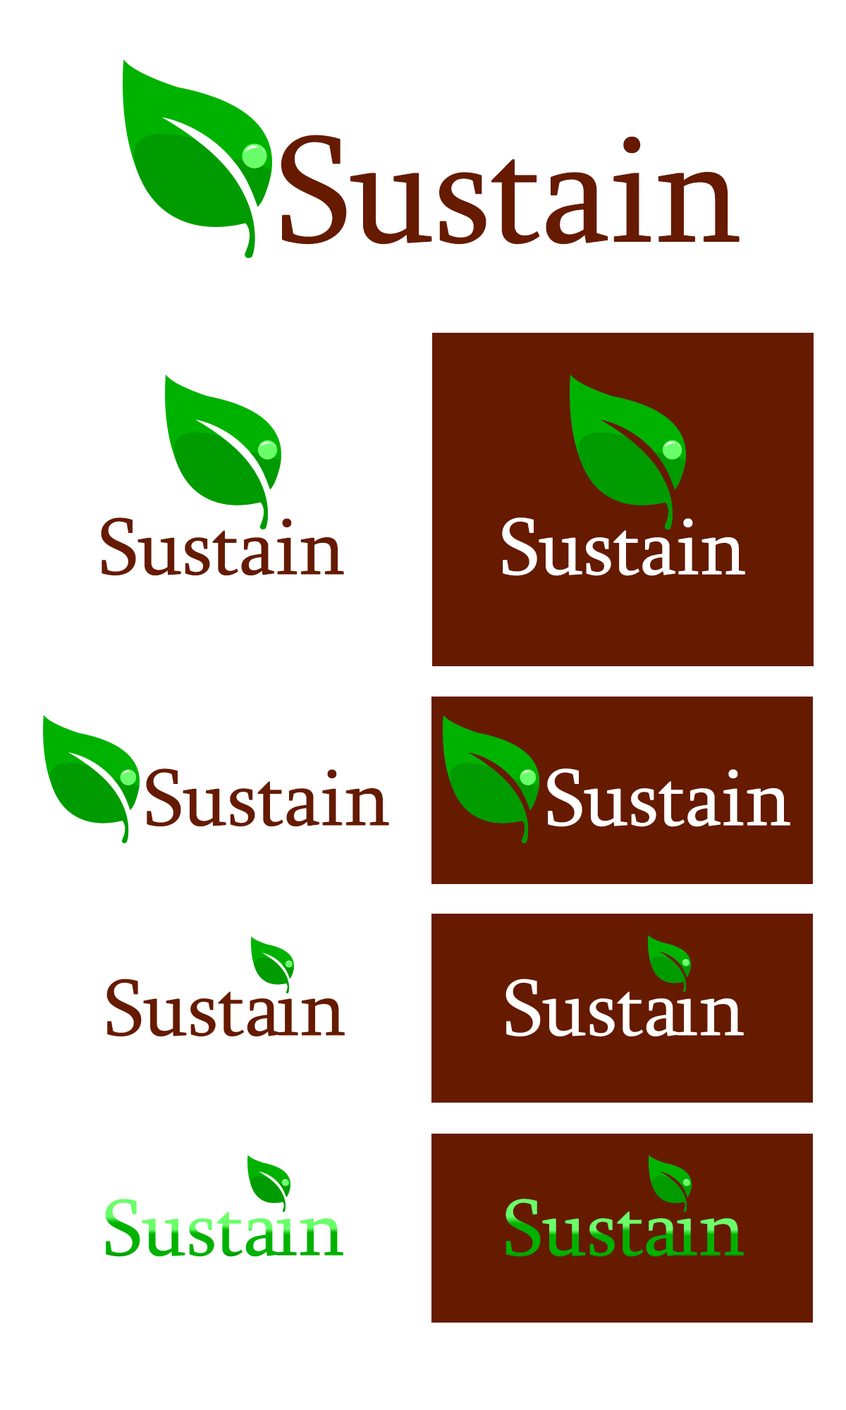
<style>
.page{position:relative;width:846px;height:1410px;background:#ffffff}
.page>*{position:absolute;margin:0}
.t1{font:155.1px "Sylfaen";color:#661a00}
.t2{font:82px "Sylfaen";color:#661a00}
.t3{font:82px "Sylfaen";color:#ffffff}
</style>
<div class="page">
<p class="t1" style="left:281px;top:135px;width:458px;height:110px">Sustain</p>
<p class="t2" style="left:101px;top:517px;width:243px;height:59px">Sustain</p>
<p class="t3" style="left:502px;top:517px;width:243px;height:59px">Sustain</p>
<p class="t2" style="left:146px;top:768px;width:243px;height:59px">Sustain</p>
<p class="t3" style="left:547px;top:768px;width:243px;height:59px">Sustain</p>
</div>
